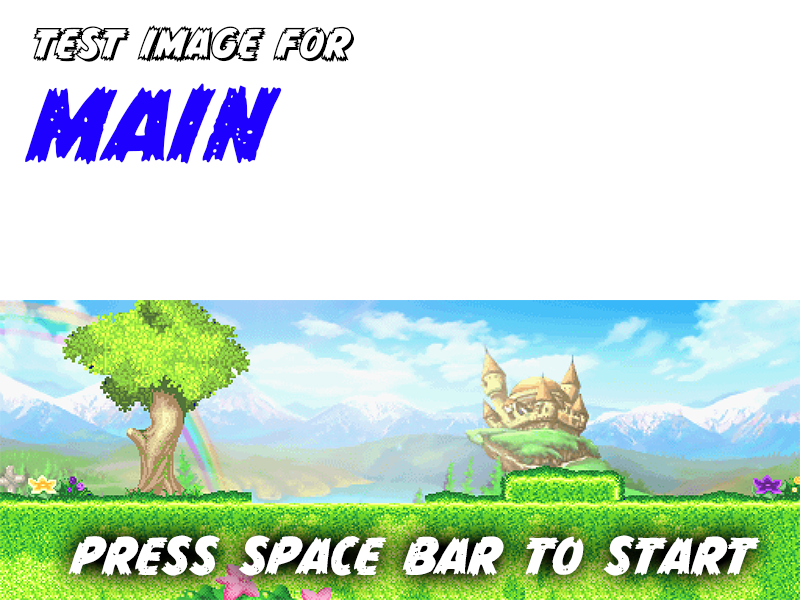
<style>
.page{position:relative;width:800px;height:600px;background:#ffffff}
.page>*{position:absolute;margin:0}
.t1{font:125px "CCMonsterMashWorn";color:#1e00ff}
.t2{font:62.5px "CCMonsterMashWorn";color:#ffffff}
</style>
<div class="page">
<p class="t1" style="left:25px;top:83px;width:257px;height:82px">main</p>
<p class="t2" style="left:68px;top:535px;width:692px;height:42px">press space bar to start</p>
</div>
